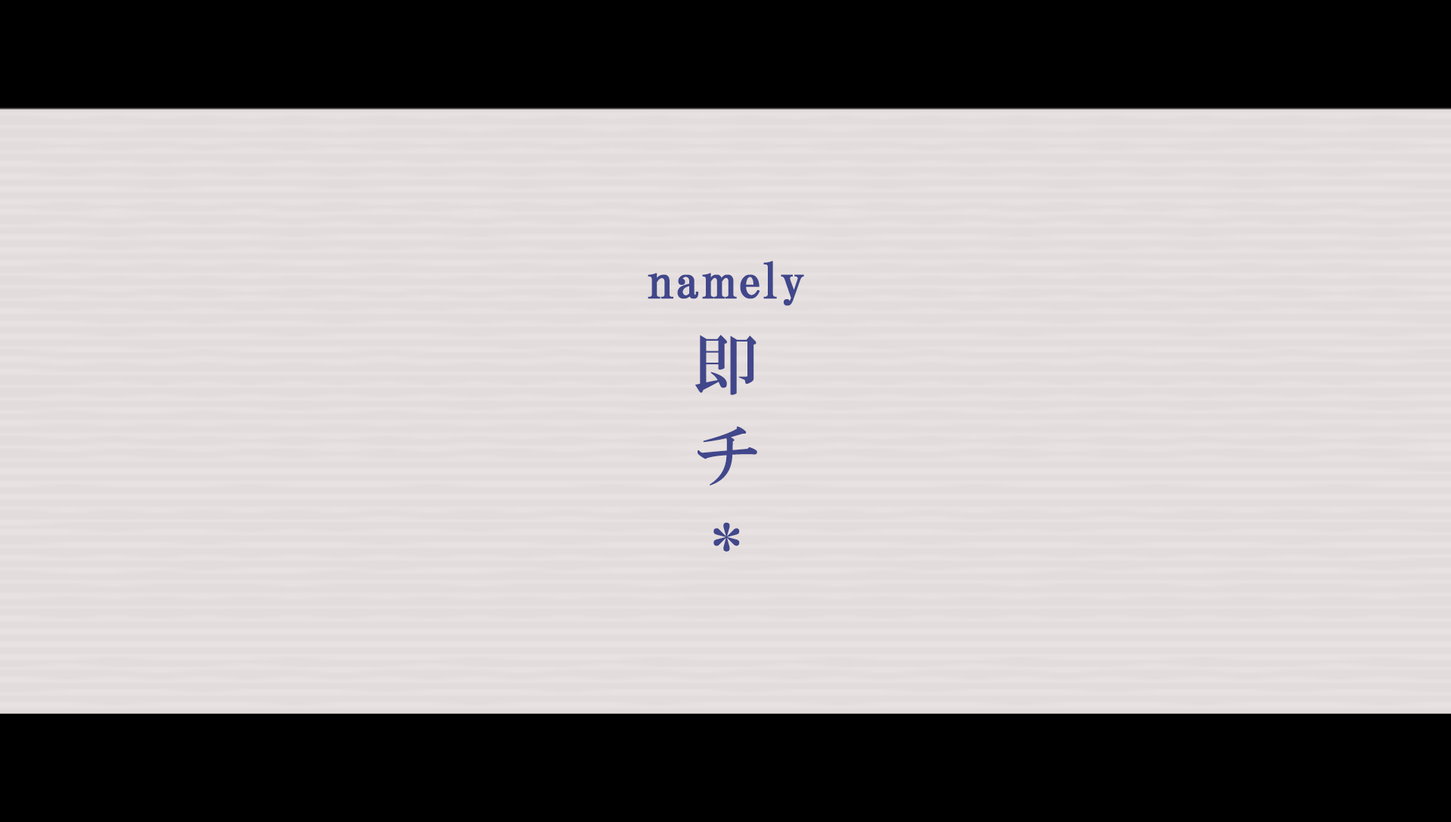
<style>
.page{position:relative;width:1451px;height:822px;background:#e3dcdc}
.page>*{position:absolute;margin:0}
.t1{font:48.4px "HGPMinchoB";letter-spacing:0.01em;color:#41478b;font-weight:bold}
.t2{font:67.2px/75.6px "HGMinchoB";letter-spacing:0.37em;color:#41478b}
.t3{font:46.1px/75.6px "HGMinchoB";letter-spacing:0.37em;color:#41478b}
</style>
<div class="page">
<p class="t1" style="left:647px;top:261px;width:157px;height:45px">namely</p>
<p class="t2" style="left:695px;top:335px;width:62px;height:217px">即チ<span class="t3">＊</span></p>
</div>
